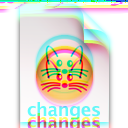
<style>
.page{position:relative;width:128px;height:128px}
.page>*{position:absolute;margin:0}
.t1{font:18px "LucidaGrande-Bold";letter-spacing:-0.02em}
</style>
<div class="page">
<p class="t1" style="left:27px;top:100px;width:73px;height:18px">changes</p>
</div>
